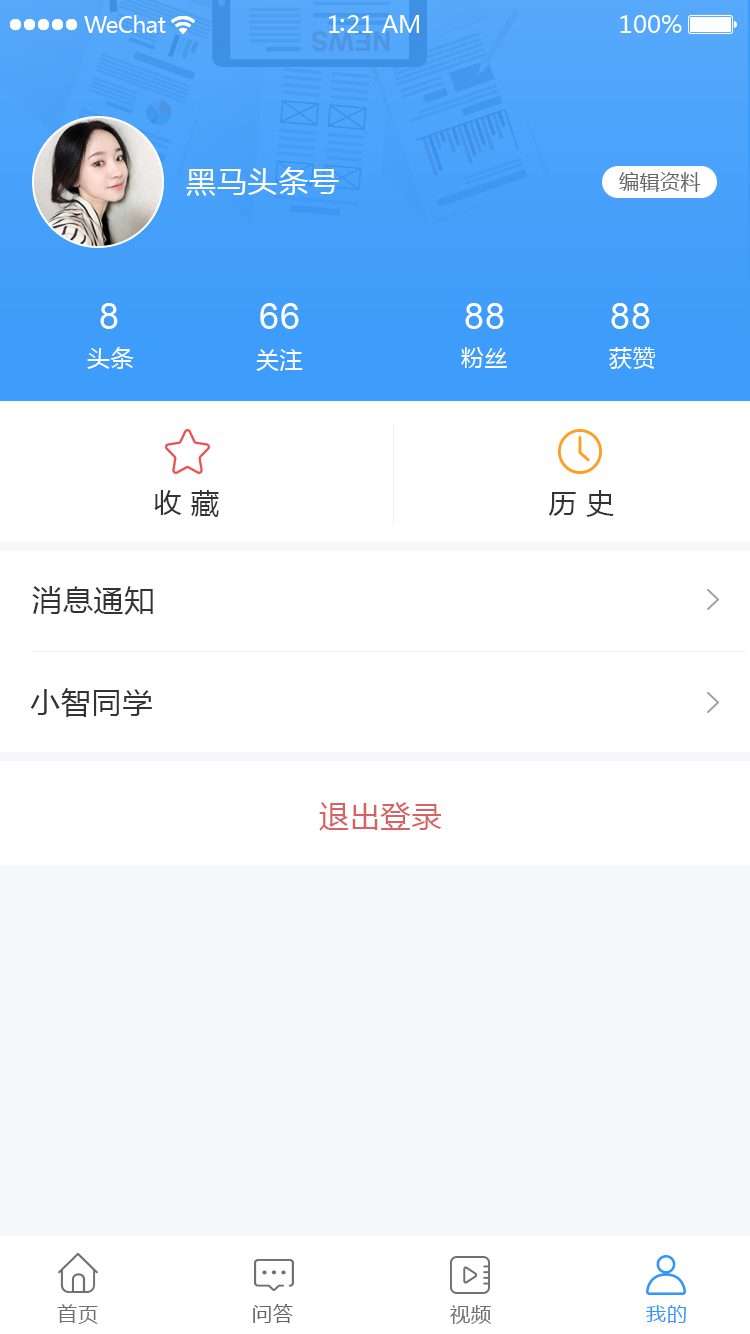
<style>
.page{position:relative;width:750px;height:1334px;background:#ffffff}
.page>*{position:absolute;margin:0}
.t1{font:30px "MicrosoftYaHei";letter-spacing:0.025em;color:#ffffff}
.t2{font:20px "MicrosoftYaHei";letter-spacing:0.025em;color:#666666}
.t3{font:36px "ArialMT";letter-spacing:0.025em;color:#ffffff}
.t4{font:23px "MicrosoftYaHei";letter-spacing:0.025em;color:#ffffff}
.t5{font:28px "MicrosoftYaHei";letter-spacing:0.025em;color:#333333}
.t6{font:30px "MicrosoftYaHei";letter-spacing:0.025em;color:#333333}
.t7{font:30px "MicrosoftYaHei";letter-spacing:0.025em;color:#d86262}
.t8{font:20px "MicrosoftYaHei";letter-spacing:0.05em;color:#707070}
.t9{font:20px "MicrosoftYaHei";letter-spacing:0.05em;color:#666666}
.t10{font:20px "MicrosoftYaHei";letter-spacing:0.05em;color:#3296fa}
</style>
<div class="page">
<p class="t1" style="left:186px;top:167px;width:153px;height:29px">黑马头条号</p>
<p class="t2" style="left:619px;top:172px;width:82px;height:20px">编辑资料</p>
<p class="t3" style="left:100px;top:303px;width:18px;height:26px">8</p>
<p class="t3" style="left:260px;top:303px;width:39px;height:26px">66</p>
<p class="t3" style="left:465px;top:303px;width:39px;height:26px">88</p>
<p class="t3" style="left:611px;top:303px;width:39px;height:26px">88</p>
<p class="t4" style="left:87px;top:347px;width:47px;height:22px">头条</p>
<p class="t4" style="left:256px;top:349px;width:47px;height:22px">关注</p>
<p class="t4" style="left:461px;top:347px;width:46px;height:21px">粉丝</p>
<p class="t4" style="left:609px;top:347px;width:47px;height:22px">获赞</p>
<p class="t5" style="left:154px;top:490px;width:65px;height:27px">收 藏</p>
<p class="t5" style="left:548px;top:490px;width:66px;height:27px">历 史</p>
<p class="t6" style="left:32px;top:586px;width:121px;height:29px">消息通知</p>
<p class="t6" style="left:30px;top:688px;width:122px;height:29px">小智同学</p>
<p class="t7" style="left:319px;top:802px;width:123px;height:29px">退出登录</p>
<p class="t8" style="left:57px;top:1304px;width:41px;height:20px">首页</p>
<p class="t9" style="left:253px;top:1304px;width:40px;height:19px">问答</p>
<p class="t8" style="left:450px;top:1305px;width:41px;height:19px">视频</p>
<p class="t10" style="left:646px;top:1305px;width:40px;height:18px">我的</p>
</div>
